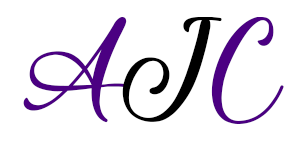
<style>
.page{position:relative;width:300px;height:146px;background:#ffffff}
.page>*{position:absolute;margin:0}
.t1{font:125px "Easy-November";letter-spacing:0.05em;color:#4b0082}
.t2{font:125px "Easy-November";letter-spacing:0.05em;color:#000000}
</style>
<div class="page">
<p class="t1" style="left:23px;top:17px;width:261px;height:107px">A<span class="t2">J</span>C</p>
</div>
